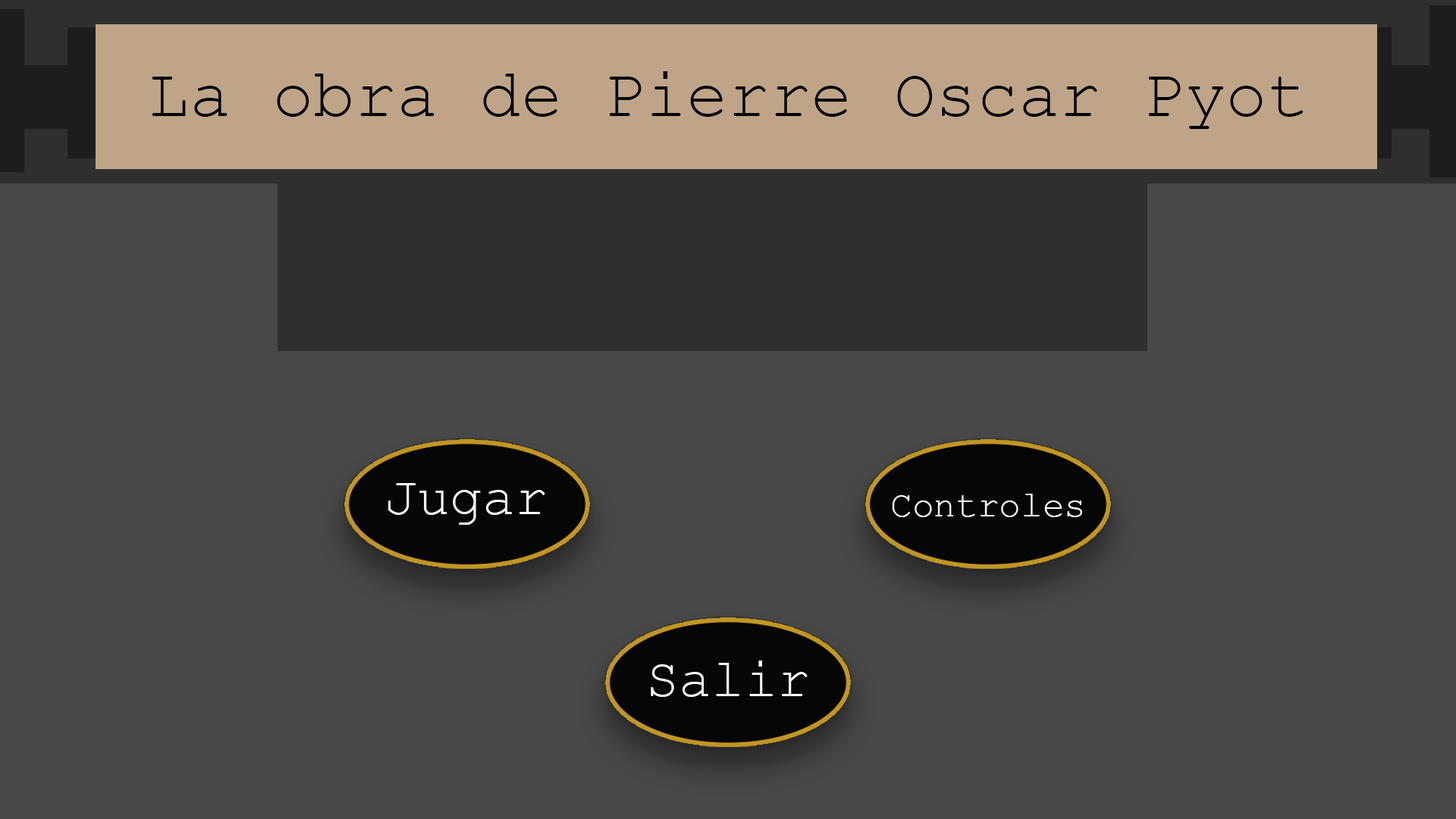
<style>
.page{position:relative;width:1456px;height:819px;background:#484848}
.page>*{position:absolute;margin:0}
.t1{font:69.1px "CourierNewPSMT";color:#000000}
.t2{font:54.6px "CourierNewPSMT";color:#ffffff}
.t3{font:36.3px "CourierNewPSMT";color:#ffffff}
</style>
<div class="page">
<p class="t1" style="left:152px;top:71px;width:1152px;height:58px">La obra de Pierre Oscar Pyot</p>
<p class="t2" style="left:388px;top:483px;width:157px;height:42px">Jugar</p>
<p class="t3" style="left:892px;top:494px;width:190px;height:23px">Controles</p>
<p class="t2" style="left:651px;top:660px;width:157px;height:37px">Salir</p>
</div>
